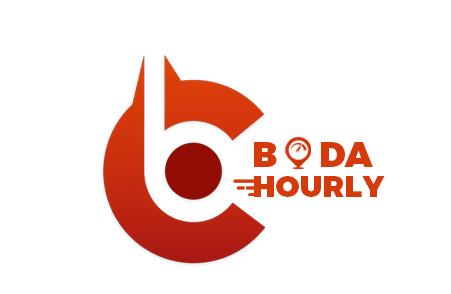
<style>
.page{position:relative;width:451px;height:294px;background:#ffffff}
.page>*{position:absolute;margin:0}
.t1{font:35px/30px "Montserrat-Black";color:#d63a0a;text-transform:uppercase}
.t2{font:30px/30px "Montserrat-Black";color:#d63a0a;text-transform:uppercase}
</style>
<div class="page">
<p class="t1" style="left:254px;top:142px;width:131px;height:55px">b      da<br><span class="t2">hourly</span></p>
</div>
